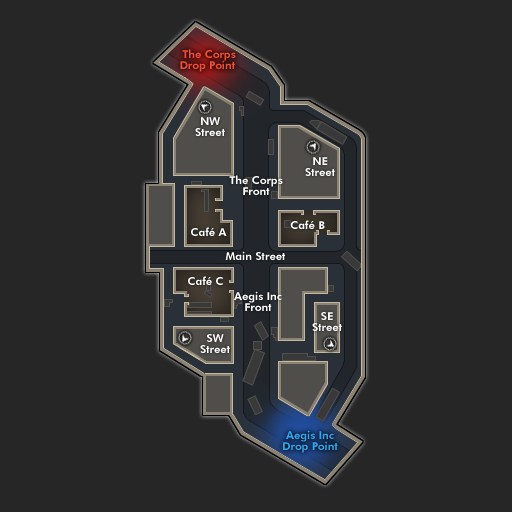
<style>
.page{position:relative;width:512px;height:512px;background:#262626}
.page>*{position:absolute;margin:0}
.t1{font:11px/11px "FuturaBT-Heavy";color:#f14f35}
.t2{font:11px/11px "FuturaBT-Heavy";color:#fefefe}
.t3{font:11px "FuturaBT-Heavy";color:#fefefe}
.t4{font:11px/11px "FuturaBT-Heavy";color:#2ea7ec}
</style>
<div class="page">
<p class="t1" style="left:180px;top:49px;width:56px;height:23px;text-align:center">The Corps<br>Drop Point</p>
<p class="t2" style="left:195px;top:117px;width:30px;height:19px;text-align:center">NW<br>Street</p>
<p class="t2" style="left:305px;top:157px;width:30px;height:19px;text-align:center">NE<br>Street</p>
<p class="t2" style="left:229px;top:175px;width:54px;height:20px;text-align:center">The Corps<br>Front</p>
<p class="t3" style="left:290px;top:220px;width:35px;height:9px">Café B</p>
<p class="t3" style="left:191px;top:227px;width:36px;height:9px">Café A</p>
<p class="t3" style="left:225px;top:251px;width:60px;height:9px">Main Street</p>
<p class="t3" style="left:188px;top:276px;width:35px;height:9px">Café C</p>
<p class="t2" style="left:234px;top:291px;width:48px;height:20px;text-align:center">Aegis Inc<br>Front</p>
<p class="t2" style="left:312px;top:312px;width:30px;height:19px;text-align:center">SE<br>Street</p>
<p class="t2" style="left:200px;top:334px;width:30px;height:19px;text-align:center">SW<br>Street</p>
<p class="t4" style="left:283px;top:430px;width:55px;height:23px;text-align:center">Aegis Inc<br>Drop Point</p>
</div>
